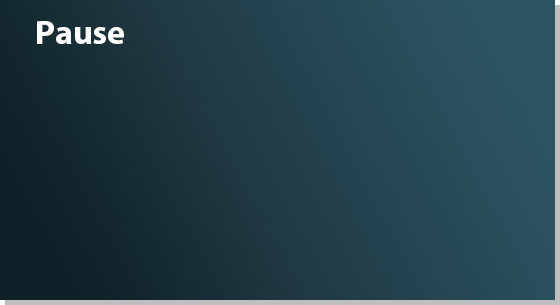
<style>
.page{position:relative;width:560px;height:305px}
.page>*{position:absolute;margin:0}
.t1{font:34px "MyriadPro-Bold";color:#ffffff}
</style>
<div class="page">
<p class="t1" style="left:37px;top:21px;width:87px;height:23px">Pause</p>
</div>
